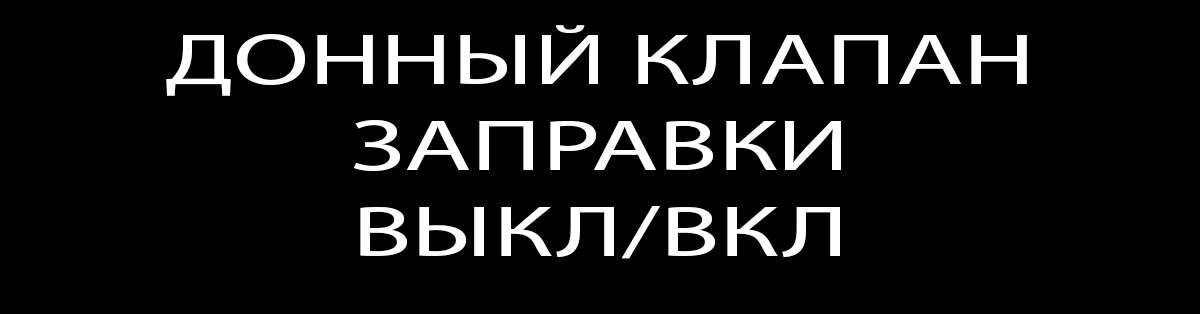
<style>
.page{position:relative;width:1200px;height:314px;background:#000000}
.page>*{position:absolute;margin:0}
.t1{font:72px "MyriadPro-Regular";color:#ffffff;scale:1.53 1}
</style>
<div class="page">
<p class="t1" style="left:166px;top:25px;width:861px;height:234px;text-align:center">ДОННЫЙ КЛАПАН<br>ЗАПРАВКИ<br>ВЫКЛ/ВКЛ</p>
</div>
